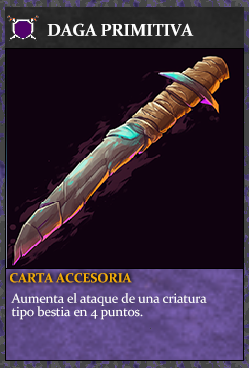
<style>
.page{position:relative;width:249px;height:368px;background:#0f020f}
.page>*{position:absolute;margin:0}
.t1{font:17.3px "Constantia-Bold";letter-spacing:-0.02em;color:#ffffff}
.t2{font:13.3px "Constantia-Bold";letter-spacing:-0.02em;color:#f2ac05}
.t3{font:13.3px/13.3px "Constantia";letter-spacing:-0.02em;color:#ffffff}
</style>
<div class="page">
<p class="t1" style="left:47px;top:23px;width:147px;height:13px">DAGA PRIMITIVA</p>
<p class="t2" style="left:10px;top:273px;width:122px;height:10px">CARTA ACCESORIA</p>
<p class="t3" style="left:11px;top:293px;width:196px;height:27px">Aumenta el ataque de una criatura<br>tipo bestia en 4 puntos.</p>
</div>
